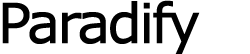
<style>
.page{position:relative;width:250px;height:54px;background:#ffffff}
.page>*{position:absolute;margin:0}
.t1{font:55px "Verdana";letter-spacing:-0.075em;color:#000000;font-weight:bold}
</style>
<div class="page">
<p class="t1" style="left:2px;top:0px;width:198px;height:55px">Paradify</p>
</div>
